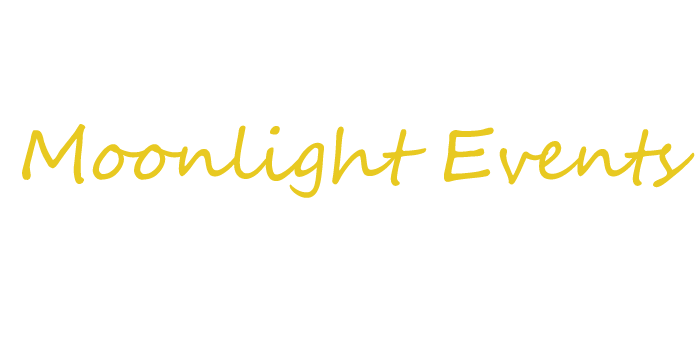
<style>
.page{position:relative;width:700px;height:350px;background:#ffffff}
.page>*{position:absolute;margin:0}
.t1{font:72px "SegoeScript";letter-spacing:-0.005em;color:#e8c921}
</style>
<div class="page">
<p class="t1" style="left:22px;top:124px;width:673px;height:74px">Moonlight Events</p>
</div>
